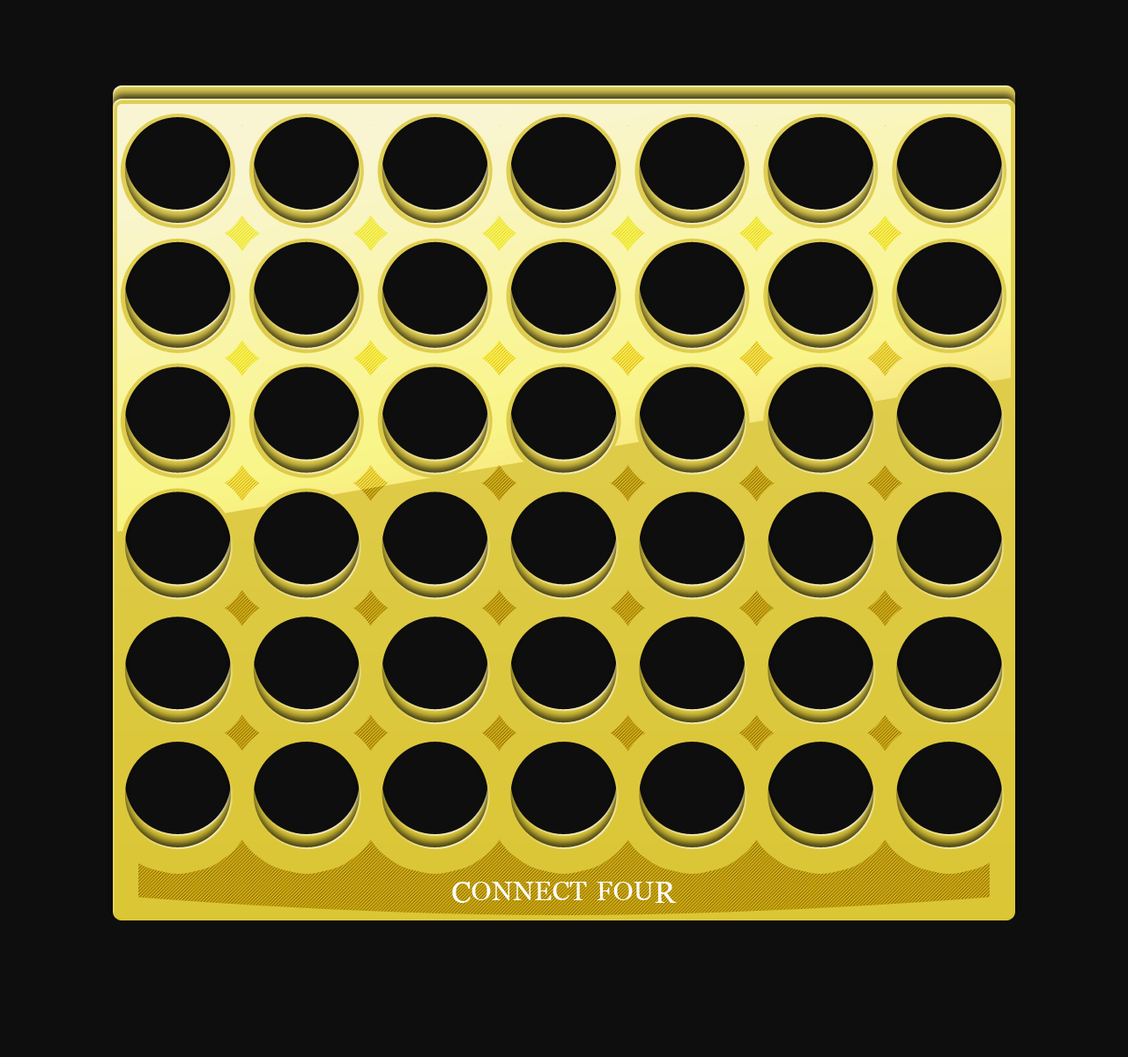
<style>
.page{position:relative;width:1128px;height:1057px;background:#0e0e0e}
.page>*{position:absolute;margin:0}
.t1{font:39.4px "Vani";color:#fefefe;font-variant:small-caps}
.t2{font:30.8px "Vani";color:#fefefe;font-variant:small-caps}
</style>
<div class="page">
<p class="t1" style="left:452px;top:882px;width:225px;height:21px"><span class="t2">C</span>onnect fou<span class="t2">R</span></p>
</div>
